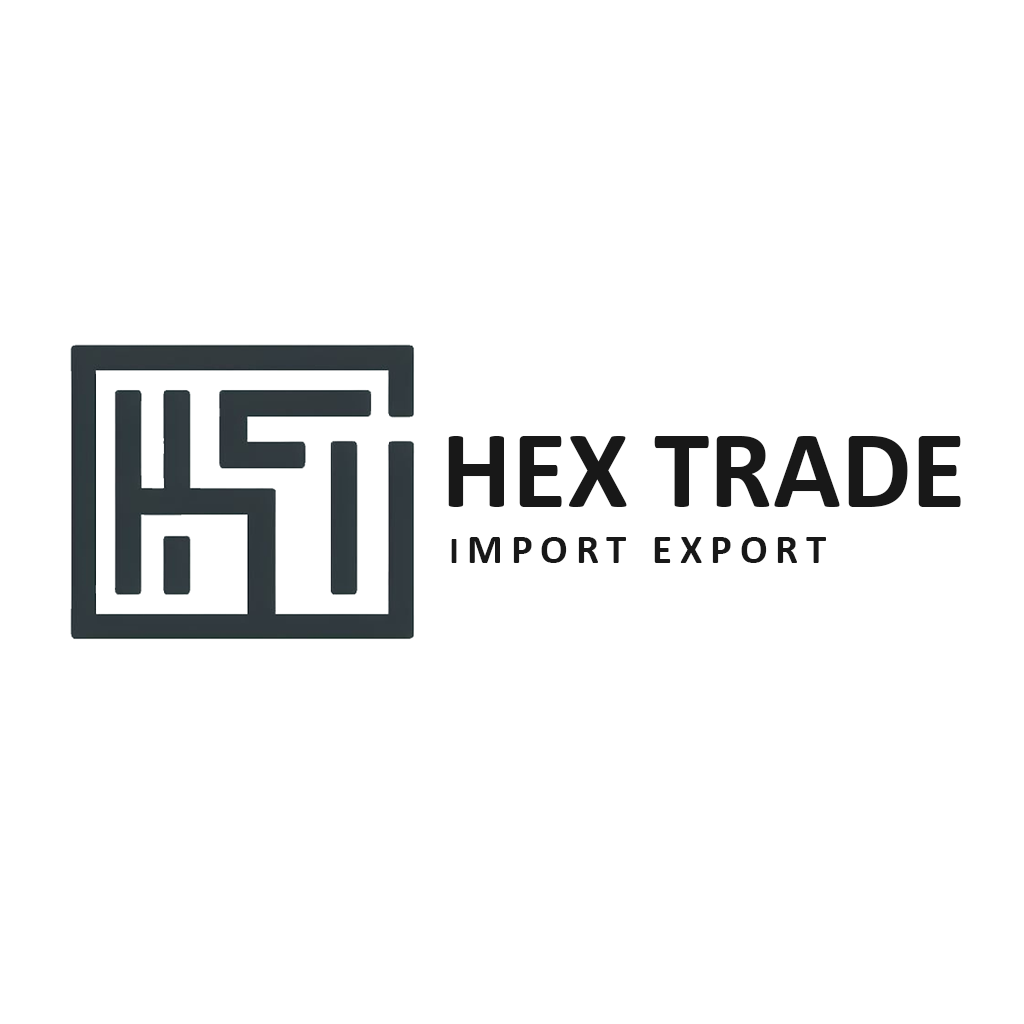
<style>
.page{position:relative;width:1024px;height:1024px;background:#ffffff}
.page>*{position:absolute;margin:0}
.t1{font:112.2px "Calibri-Bold";color:#181818}
.t2{font:40.5px "Calibri-Bold";letter-spacing:0.2em;color:#181818}
.t3{font:38.4px "Calibri-Bold";letter-spacing:0.2em;color:#181818}
</style>
<div class="page">
<p class="t1" style="left:448px;top:436px;width:513px;height:71px">HEX TRADE</p>
<p class="t2" style="left:451px;top:537px;width:375px;height:26px"><span class="t3">I</span>MPORT EXPORT</p>
</div>
